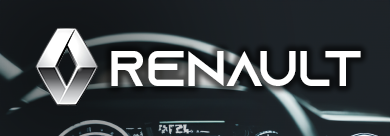
<style>
.page{position:relative;width:390px;height:136px}
.page>*{position:absolute;margin:0}
.t1{font:50px "AzonixRegular";color:#ffffff}
</style>
<div class="page">
<p class="t1" style="left:111px;top:51px;width:250px;height:35px">Renault</p>
</div>
